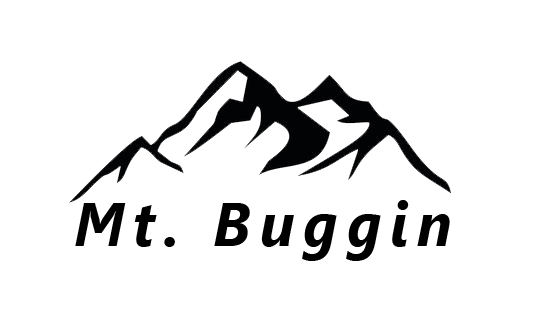
<style>
.page{position:relative;width:552px;height:312px;background:#ffffff}
.page>*{position:absolute;margin:0}
.t1{font:61.8px "SegoeUI-BoldItalic";letter-spacing:0.15em;color:#000000;scale:0.94 1}
</style>
<div class="page">
<p class="t1" style="left:75px;top:200px;width:375px;height:61px">Mt. Buggin</p>
</div>
